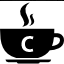
<style>
.page{position:relative;width:64px;height:64px;background:#ffffff}
.page>*{position:absolute;margin:0}
.t1{font:22.5px "MyriadPro-Bold";color:#ffffff}
</style>
<div class="page">
<p class="t1" style="left:21px;top:35px;width:13px;height:16px">C</p>
</div>
